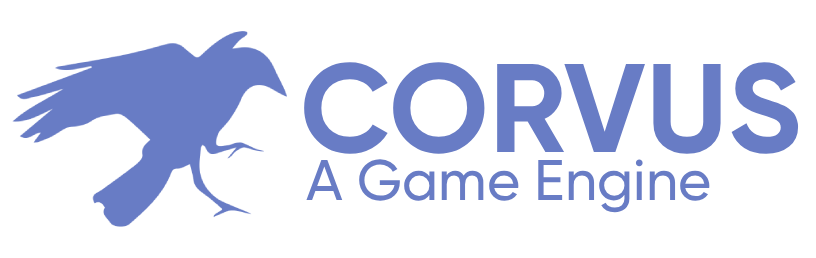
<style>
.page{position:relative;width:816px;height:258px;background:#ffffff}
.page>*{position:absolute;margin:0}
.t1{font:125.6px "Gilroy-Bold";color:#687cc5}
.t2{font:57.1px "Gilroy-Medium";color:#687cc5}
</style>
<div class="page">
<p class="t1" style="left:304px;top:62px;width:495px;height:92px">CORVUS</p>
<p class="t2" style="left:306px;top:159px;width:404px;height:54px">A Game Engine</p>
</div>
